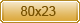
<style>
.page{position:relative;width:80px;height:23px}
.page>*{position:absolute;margin:0}
.t1{font:13px "ArialMT";color:#775100}
</style>
<div class="page">
<p class="t1" style="left:21px;top:6px;width:35px;height:10px">80x23</p>
</div>
